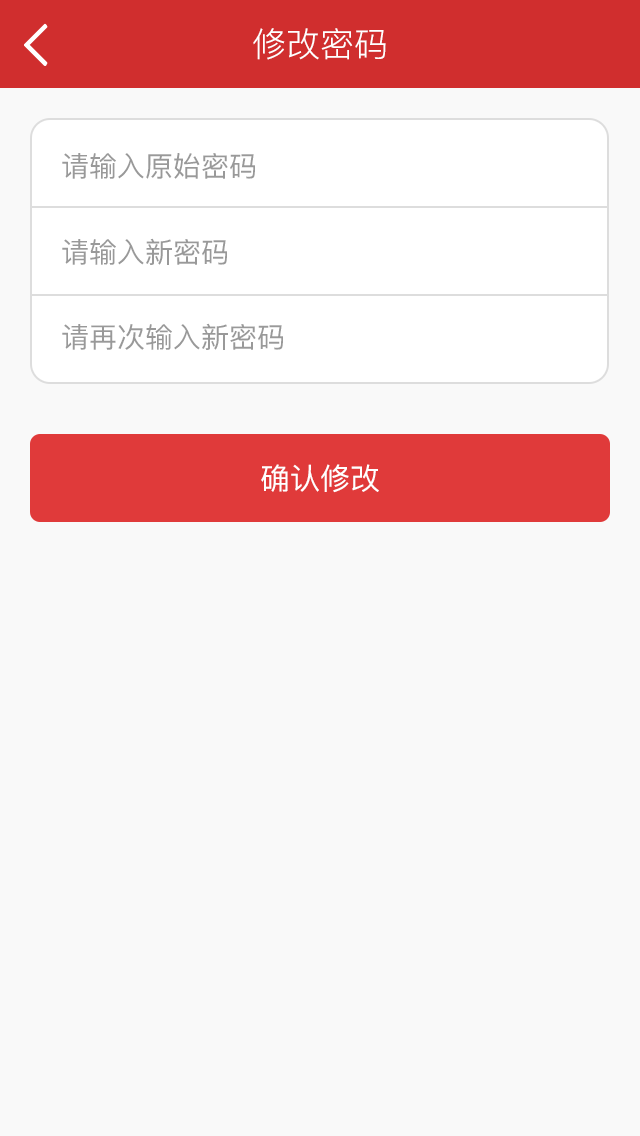
<style>
.page{position:relative;width:640px;height:1136px;background:#f9f9f9}
.page>*{position:absolute;margin:0}
.t1{font:34px "PingFang-SC-Regular";color:#ffffff}
.t2{font:28px "PingFang-SC-Medium";color:#999999}
.t3{font:30px "PingFang-SC-Medium";color:#ffffff}
</style>
<div class="page">
<p class="t1" style="left:253px;top:28px;width:133px;height:32px">修改密码</p>
<p class="t2" style="left:62px;top:153px;width:193px;height:26px">请输入原始密码</p>
<p class="t2" style="left:62px;top:238px;width:165px;height:27px">请输入新密码</p>
<p class="t2" style="left:62px;top:323px;width:221px;height:27px">请再次输入新密码</p>
<p class="t3" style="left:261px;top:464px;width:118px;height:29px">确认修改</p>
</div>
